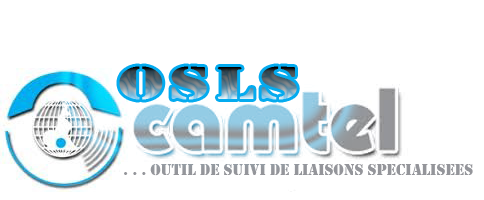
<style>
.page{position:relative;width:484px;height:200px;background:#ffffff}
.page>*{position:absolute;margin:0}
.t1{font:48px "Stencil";letter-spacing:0.075em;scale:1.5 1}
.t2{font:16px "Stencil";color:#94959a}
</style>
<div class="page">
<p class="t1" style="left:119px;top:66px;width:178px;height:34px">osls</p>
<p class="t2" style="left:124px;top:164px;width:349px;height:12px">. . . outil DE sUIVI DE LIAISONS SPECIALISEES</p>
</div>
